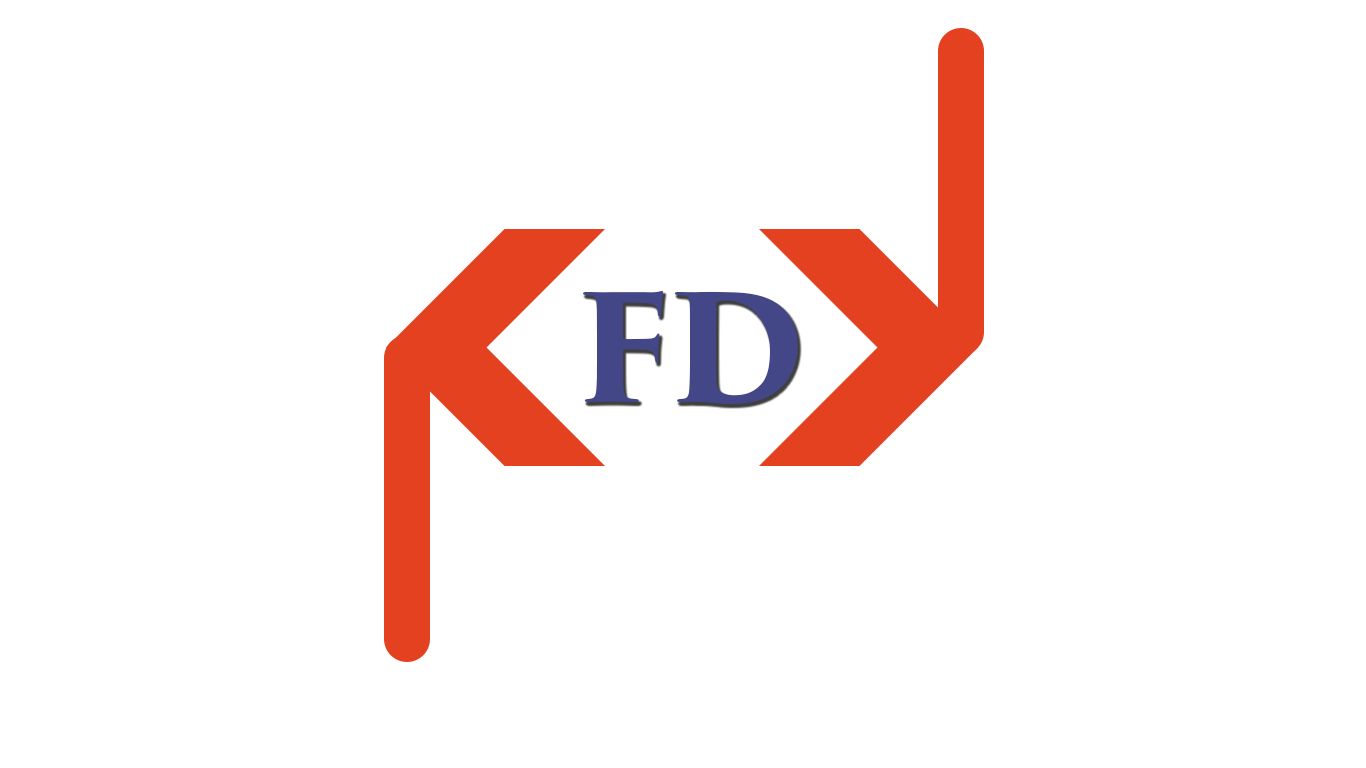
<style>
.page{position:relative;width:1366px;height:768px;background:#ffffff}
.page>*{position:absolute;margin:0}
.t1{font:146.6px "TrajanPro3-Bold";color:#434687}
</style>
<div class="page">
<p class="t1" style="left:583px;top:291px;width:215px;height:113px">FD</p>
</div>
